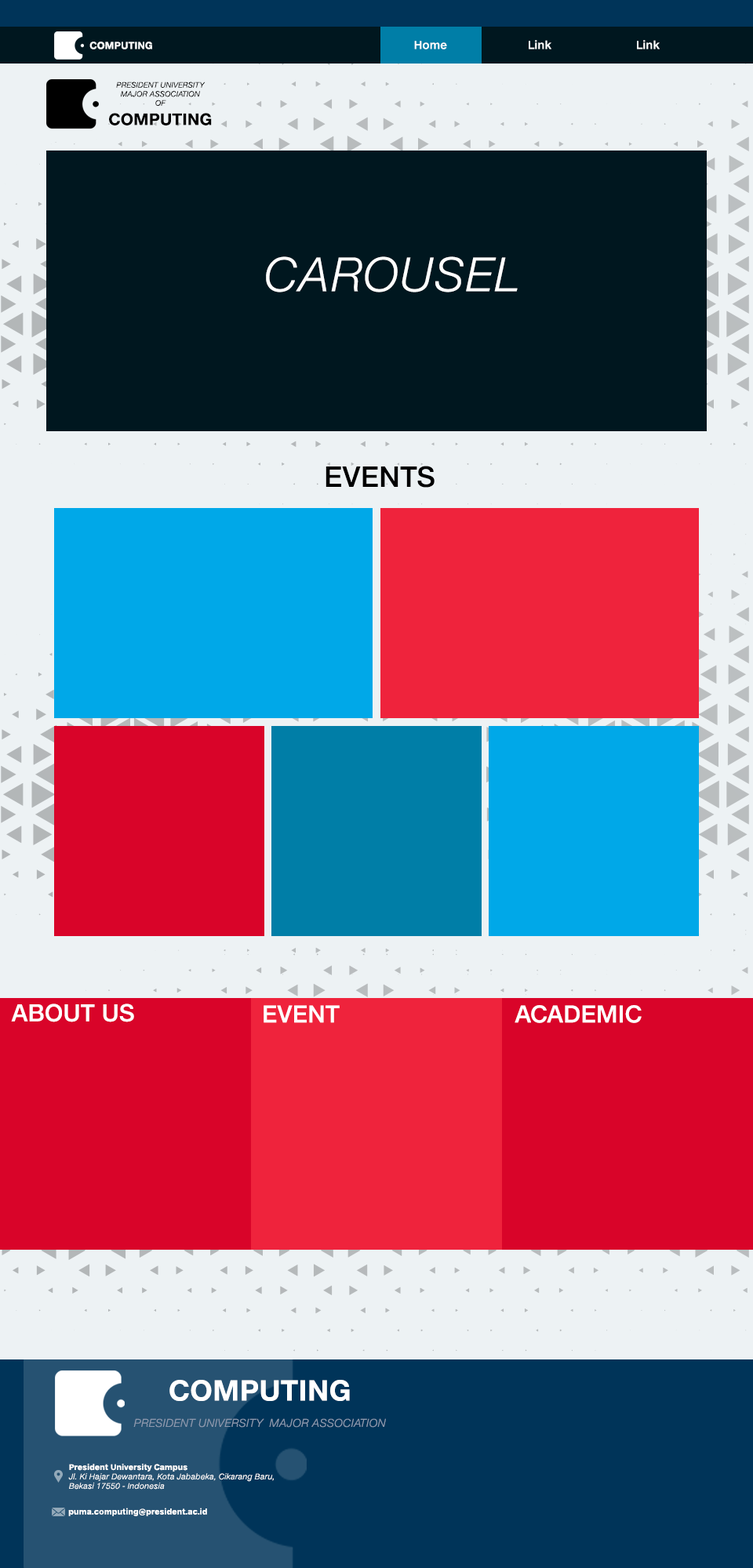
<style>
.page{position:relative;width:753px;height:1568px;background:#edf2f4}
.page>*{position:absolute;margin:0}
.t1{font:9.8px "HelveticaNeueeTextPro-Bold";color:#ffffff}
.t2{font:4.6px "HelveticaNeueeTextPro-LightItal";color:#ffffff}
.t3{font:11px "HelveticaNeueeTextPro-Medium";color:#ffffff}
.t4{font:7.5px "HelveticaNeueeTextPro-LightItal";color:#000000}
.t5{font:16.1px "HelveticaNeueeTextPro-Bold";color:#000000}
.t6{font:47px "HelveticaNeueeTextPro-LightItal";color:#ffffff}
.t7{font:28.2px "HelveticaNeueeTextPro-Medium";color:#010000}
.t8{font:23.5px "HelveticaNeueeTextPro-Medium";color:#ffffff}
.t9{font:11px "HelveticaNeueeTextPro-LightItal";color:#8d99ae}
.t10{font:28.2px "HelveticaNeueeTextPro-Bold";color:#ffffff}
.t11{font:7.8px "HelveticaNeueeTextPro-LightItal";color:#ffffff}
.t12{font:7.8px "HelveticaNeueeTextPro-Bold";color:#ffffff}
</style>
<div class="page">
<p class="t1" style="left:89px;top:42px;width:63px;height:7px"><span class="t2"><br></span>COMPUTING</p>
<p class="t3" style="left:414px;top:41px;width:33px;height:8px">Home</p>
<p class="t3" style="left:528px;top:40px;width:23px;height:9px">Link</p>
<p class="t3" style="left:637px;top:40px;width:22px;height:9px">Link</p>
<p class="t4" style="left:109px;top:82px;width:103px;height:43px;text-align:justify">PRESIDENT UNIVERSITY<br>MAJOR ASSOCIATION<br>OF<br><span class="t5">COMPUTING</span></p>
<p class="t6" style="left:266px;top:256px;width:251px;height:36px">CAROUSEL</p>
<p class="t7" style="left:325px;top:466px;width:109px;height:22px">EVENTS</p>
<p class="t8" style="left:11px;top:1004px;width:123px;height:18px">ABOUT US</p>
<p class="t8" style="left:263px;top:1005px;width:76px;height:18px">EVENT</p>
<p class="t8" style="left:514px;top:1005px;width:127px;height:18px">ACADEMIC</p>
<p class="t9" style="left:133px;top:1380px;width:253px;height:48px;text-align:justify"><span class="t10">COMPUTING<br></span><br>PRESIDENT UNIVERSITY  MAJOR ASSOCIATION</p>
<p class="t11" style="left:68px;top:1464px;width:206px;height:26px;text-align:right"><span class="t12">President University Campus</span> <br>Jl. Ki Hajar Dewantara, Kota Jababeka, Cikarang Baru, <br>Bekasi 17550 - Indonesia</p>
<p class="t12" style="left:68px;top:1508px;width:139px;height:8px">puma.computing@president.ac.id</p>
</div>
